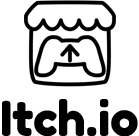
<style>
.page{position:relative;width:139px;height:136px;background:#ffffff}
.page>*{position:absolute;margin:0}
.t1{font:48px "FredokaOne-Regular";color:#000000}
</style>
<div class="page">
<p class="t1" style="left:2px;top:99px;width:136px;height:38px">Itch.io</p>
</div>
